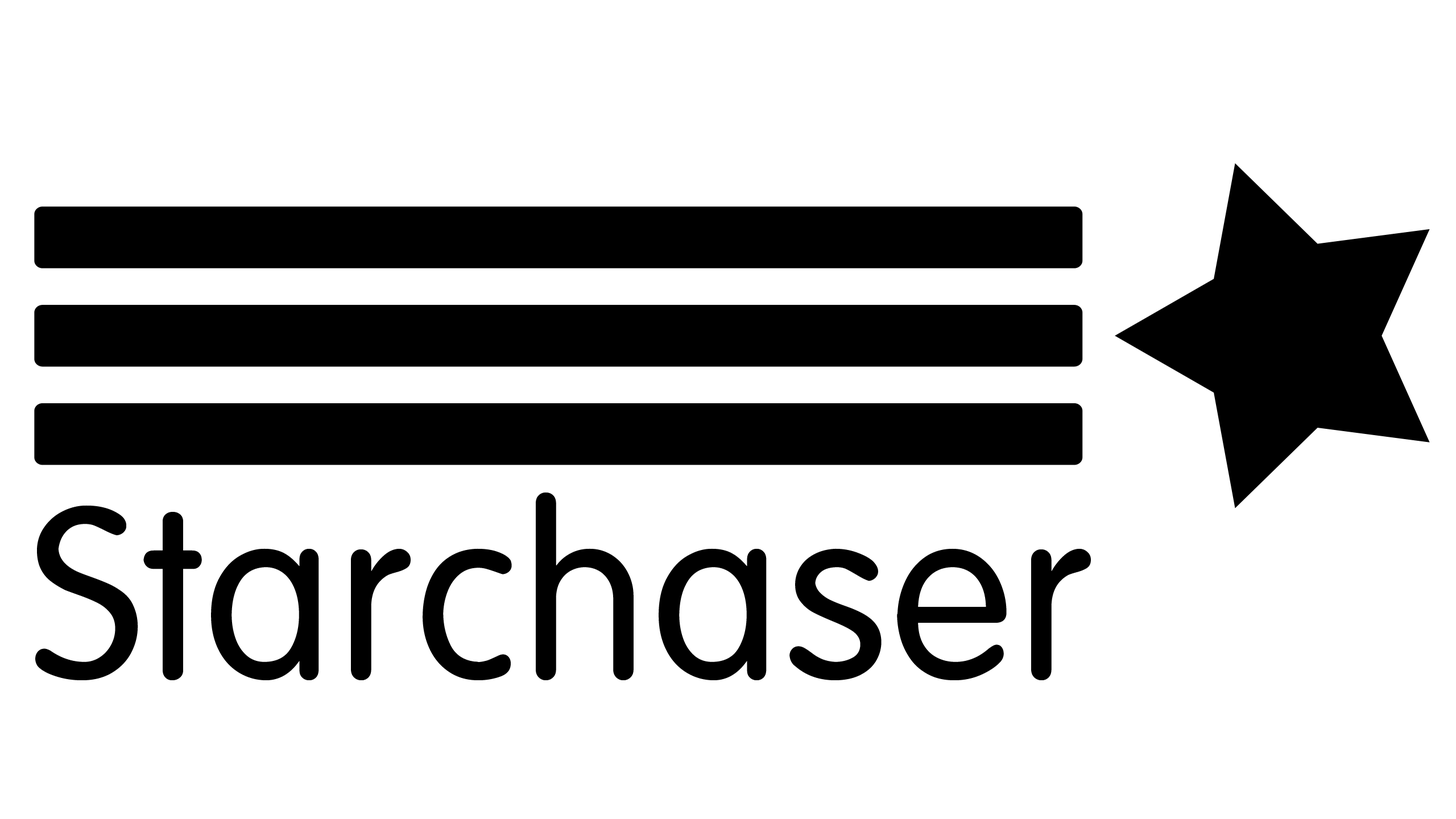
<style>
.page{position:relative;width:1456px;height:819px;background:#ffffff}
.page>*{position:absolute;margin:0}
.t1{font:240.4px "VAGRounded-Lt-Normal";letter-spacing:0.02em;color:#000000;scale:0.97 1}
</style>
<div class="page">
<p class="t1" style="left:35px;top:492px;width:1056px;height:188px">Starchaser</p>
</div>
